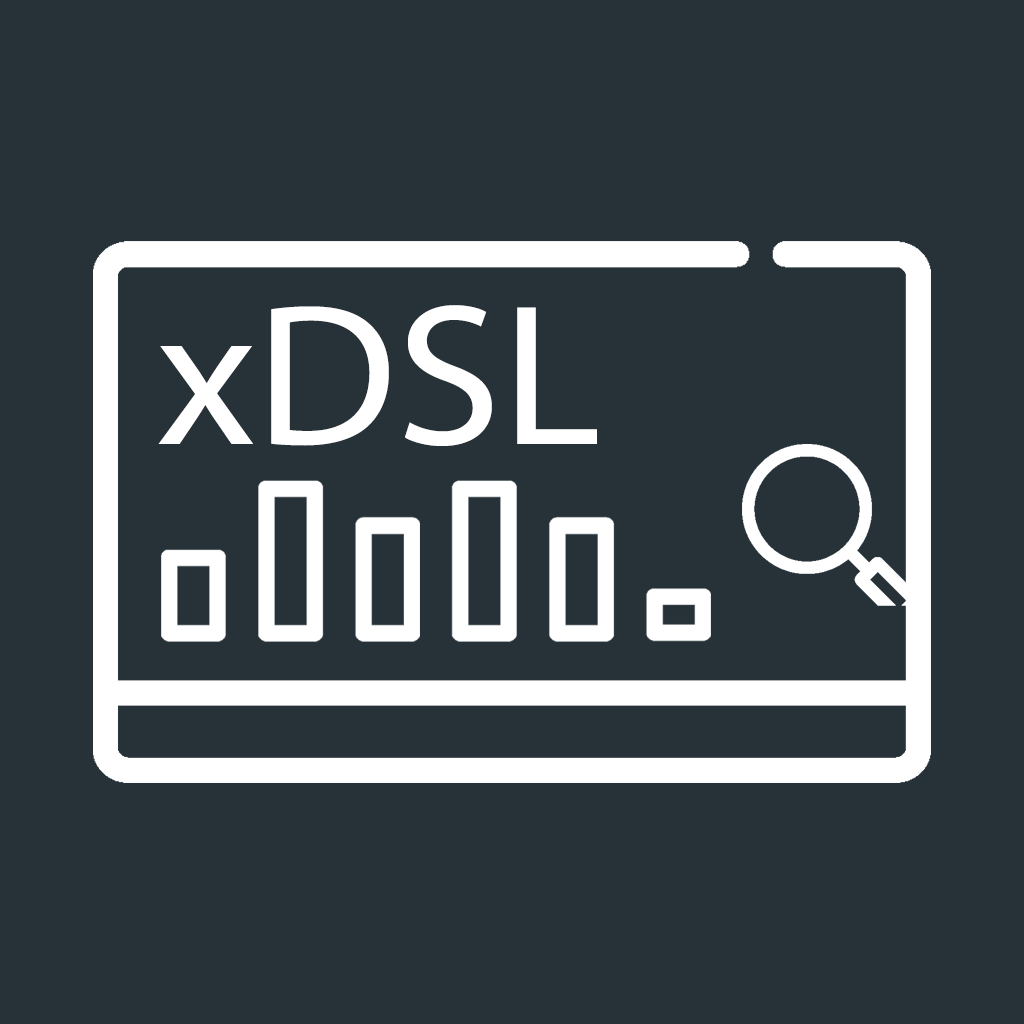
<style>
.page{position:relative;width:1024px;height:1024px;background:#263238}
.page>*{position:absolute;margin:0}
.t1{font:202.4px "MyriadPro-Regular";color:#ffffff;scale:1.05 1}
</style>
<div class="page">
<p class="t1" style="left:158px;top:305px;width:439px;height:141px">xDSL</p>
</div>
